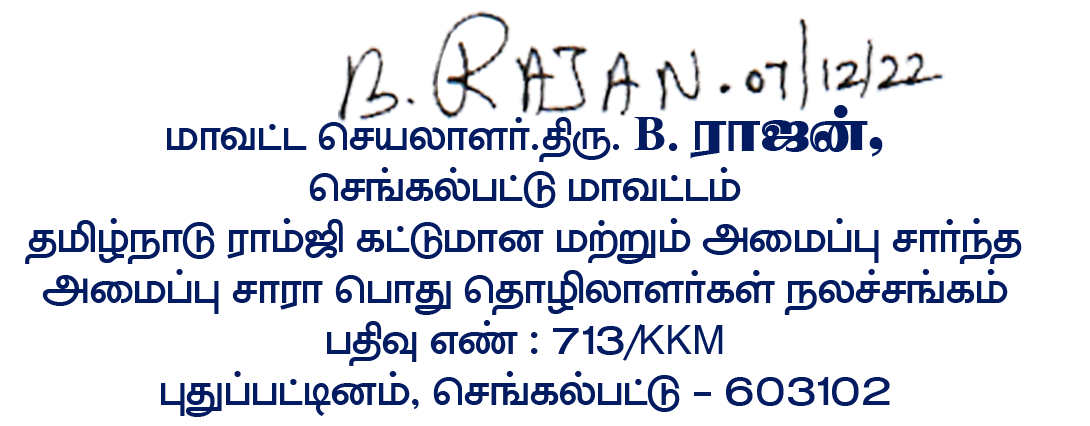
<style>
.page{position:relative;width:1090px;height:426px;background:#ffffff}
.page>*{position:absolute;margin:0}
.t1{font:57px/51px "Kambar";color:#021b61}
.t2{font:48.7px/51px "Times-Bold";color:#021b61}
.t3{font:73.7px/51px "Bramma";color:#021b61}
.t4{font:40.4px/51px "ArialMT";color:#021b61}
</style>
<div class="page">
<p class="t1" style="left:25px;top:105px;width:997px;height:312px;text-align:center">\Vkâ¦ ØÄBéVáì.]ò. <span class="t2">B. </span><span class="t3">«VÛ[,<br></span>ØÄºï_Ãâ| \Vkâ¦D<br>&gt;tµåV| «VD÷ ïâ|\Vª \u®D ¶ç\©A ÄVìÍ&gt;<br>¶ç\©A ÄV«V ØÃVm Ø&gt;VaéVáìï^ åéßÄºïD<br>Ã]¡ ¨õ : 713/<span class="t4">KKM<br></span>Am©Ãâ½ªD, ØÄºï_Ãâ| - 603102</p>
</div>
